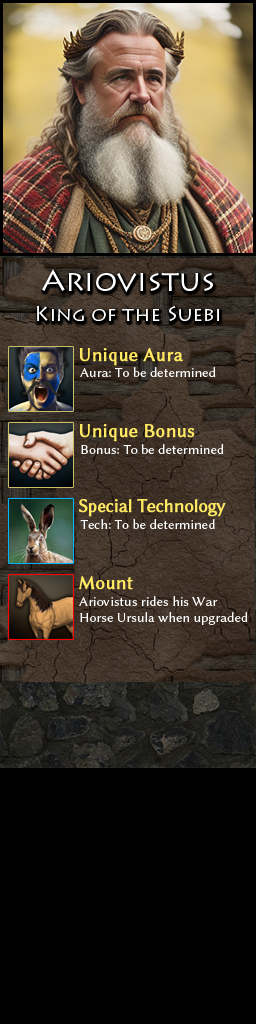
<style>
.page{position:relative;width:256px;height:1024px;background:#000000}
.page>*{position:absolute;margin:0}
.t1{font:20px/30px "LithosPro-Regular";color:#ffffff}
.t2{font:30px/30px "LithosPro-Regular";color:#ffffff}
.t3{font:19px "LinBiolinumO";color:#ffe963;font-weight:bold}
.t4{font:14px "LinBiolinumO";color:#ffffff}
.t5{font:19px "LinBiolinumO";letter-spacing:-0.025em;color:#ffe963;font-weight:bold}
</style>
<div class="page">
<p class="t1" style="left:37px;top:269px;width:182px;height:52px;text-align:center"><span class="t2">Ariovistus<br></span>King of the Suebi</p>
<p class="t3" style="left:79px;top:348px;width:104px;height:18px">Unique Aura</p>
<p class="t4" style="left:80px;top:367px;width:136px;height:10px">Aura: To be determined</p>
<p class="t3" style="left:79px;top:424px;width:116px;height:18px">Unique Bonus</p>
<p class="t4" style="left:81px;top:444px;width:143px;height:10px">Bonus: To be determined</p>
<p class="t5" style="left:79px;top:498px;width:147px;height:19px">Special Technology</p>
<p class="t4" style="left:80px;top:519px;width:135px;height:10px">Tech: To be determined</p>
<p class="t3" style="left:79px;top:576px;width:54px;height:14px">Mount</p>
<p class="t4" style="left:79px;top:596px;width:169px;height:29px">Ariovistus rides his War <br>Horse Ursula when upgraded</p>
</div>
